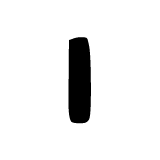
<style>
.page{position:relative;width:160px;height:160px;background:#ffffff}
.page>*{position:absolute;margin:0}
.t1{font:159.4px "QAReports";color:#000000}
</style>
<div class="page">
<p class="t1" style="left:68px;top:37px;width:23px;height:87px">I</p>
</div>
